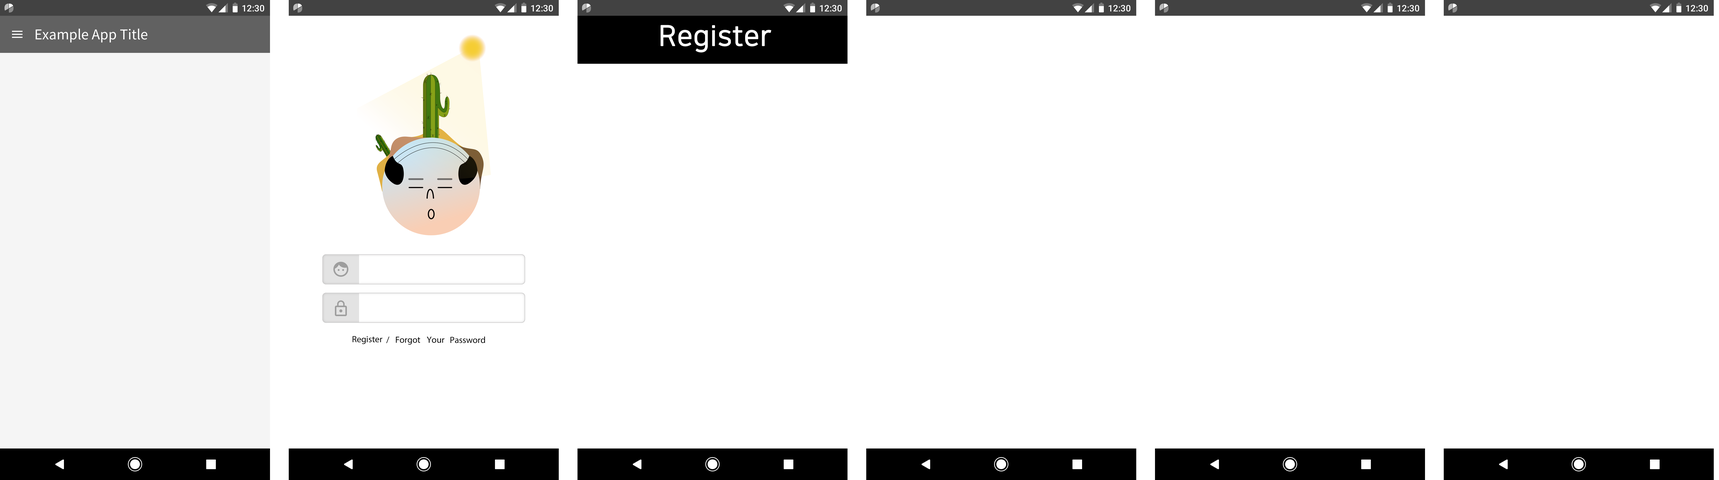
<style>
.page{position:relative;width:1719px;height:480px;background:#ffffff}
.page>*{position:absolute;margin:0}
.t1{font:9px "Roboto-Medium";color:#ffffff}
.t2{font:13.5px "NotoSansCJKkr-Regular";color:#ffffff}
.t3{font:28.1px "NanumSquareOTFR";color:#fefefe;font-weight:bold}
.t4{font:9px "MyriadPro-Regular";color:#000000}
</style>
<div class="page">
<p class="t1" style="left:242px;top:5px;width:22px;height:7px">12:30</p>
<p class="t1" style="left:531px;top:5px;width:22px;height:7px">12:30</p>
<p class="t1" style="left:820px;top:5px;width:22px;height:7px">12:30</p>
<p class="t1" style="left:1109px;top:5px;width:21px;height:7px">12:30</p>
<p class="t1" style="left:1397px;top:5px;width:22px;height:7px">12:30</p>
<p class="t1" style="left:1686px;top:5px;width:22px;height:7px">12:30</p>
<p class="t2" style="left:36px;top:28px;width:111px;height:15px">Example App Title</p>
<p class="t3" style="left:661px;top:25px;width:110px;height:27px">Register</p>
<p class="t4" style="left:352px;top:336px;width:30px;height:8px">Register</p>
<p class="t4" style="left:386px;top:337px;width:3px;height:6px">/</p>
<p class="t4" style="left:396px;top:337px;width:24px;height:8px">Forgot</p>
<p class="t4" style="left:427px;top:337px;width:17px;height:6px">Your</p>
<p class="t4" style="left:450px;top:337px;width:35px;height:6px">Password</p>
</div>
